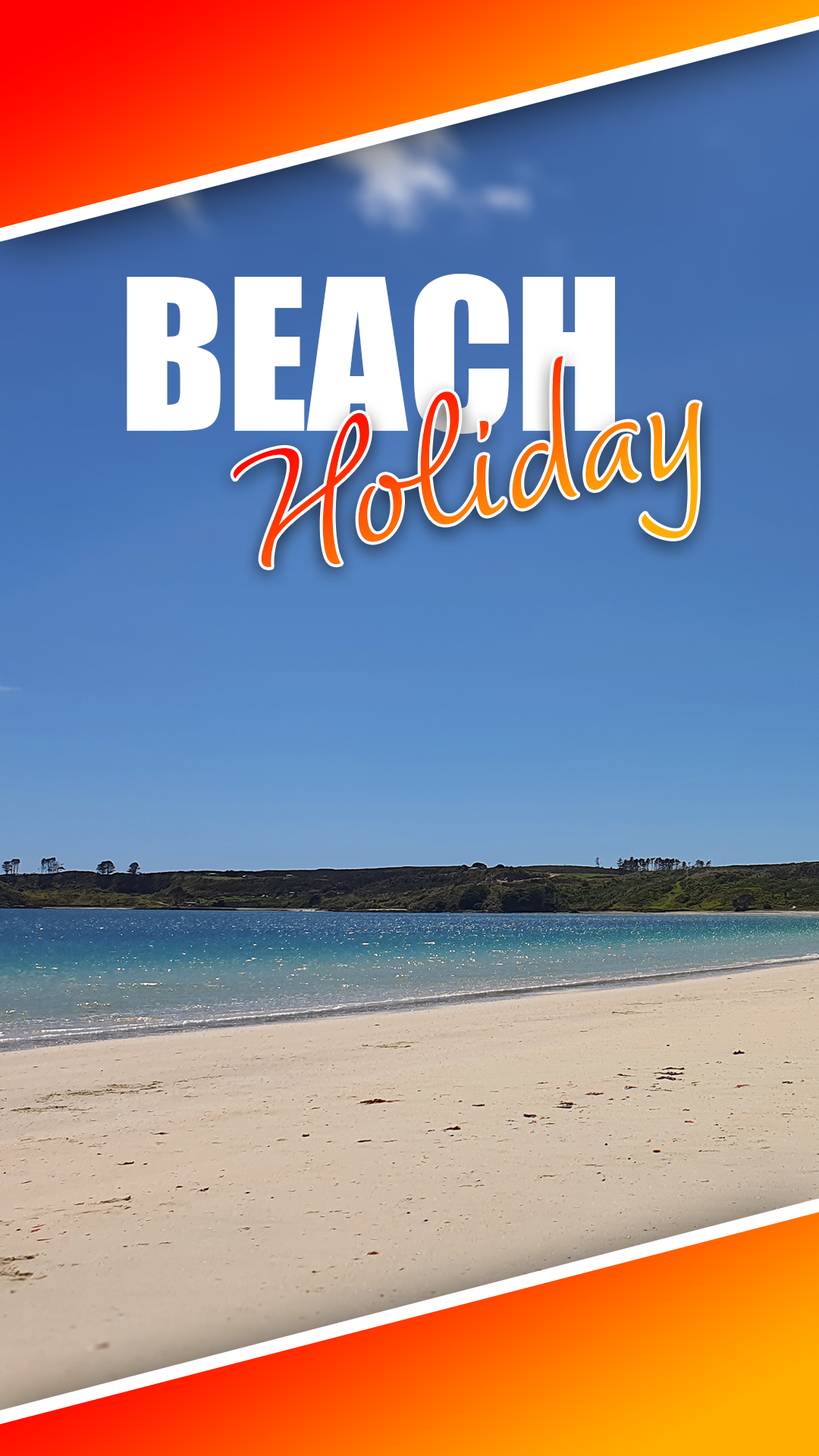
<style>
.page{position:relative;width:819px;height:1456px}
.page>*{position:absolute;margin:0}
.t1{font:195.2px "Impact";color:#ffffff;text-transform:uppercase}
.t2{font:195.2px "Dolce-Regular"}
</style>
<div class="page">
<p class="t1" style="left:127px;top:274px;width:488px;height:160px">BEACH</p>
<p class="t2" style="left:233px;top:356px;width:467px;height:211px;rotate:-13deg">Holiday</p>
</div>
